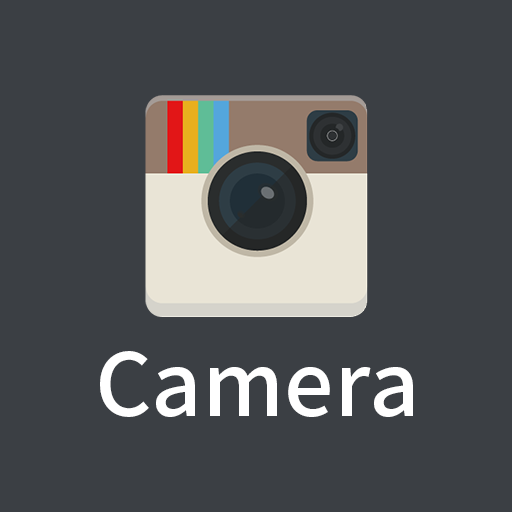
<style>
.page{position:relative;width:512px;height:512px;background:#3b3f44}
.page>*{position:absolute;margin:0}
.t1{font:87.5px "NotoSansCJKtc-Medium";color:#ffffff}
</style>
<div class="page">
<p class="t1" style="left:100px;top:351px;width:313px;height:66px">Camera</p>
</div>
